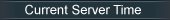
<style>
.page{position:relative;width:170px;height:20px;background:#23333b}
.page>*{position:absolute;margin:0}
.t1{font:13px "ArialMT";color:#ffffff}
</style>
<div class="page">
<p class="t1" style="left:25px;top:4px;width:116px;height:11px">Current Server Time</p>
</div>
